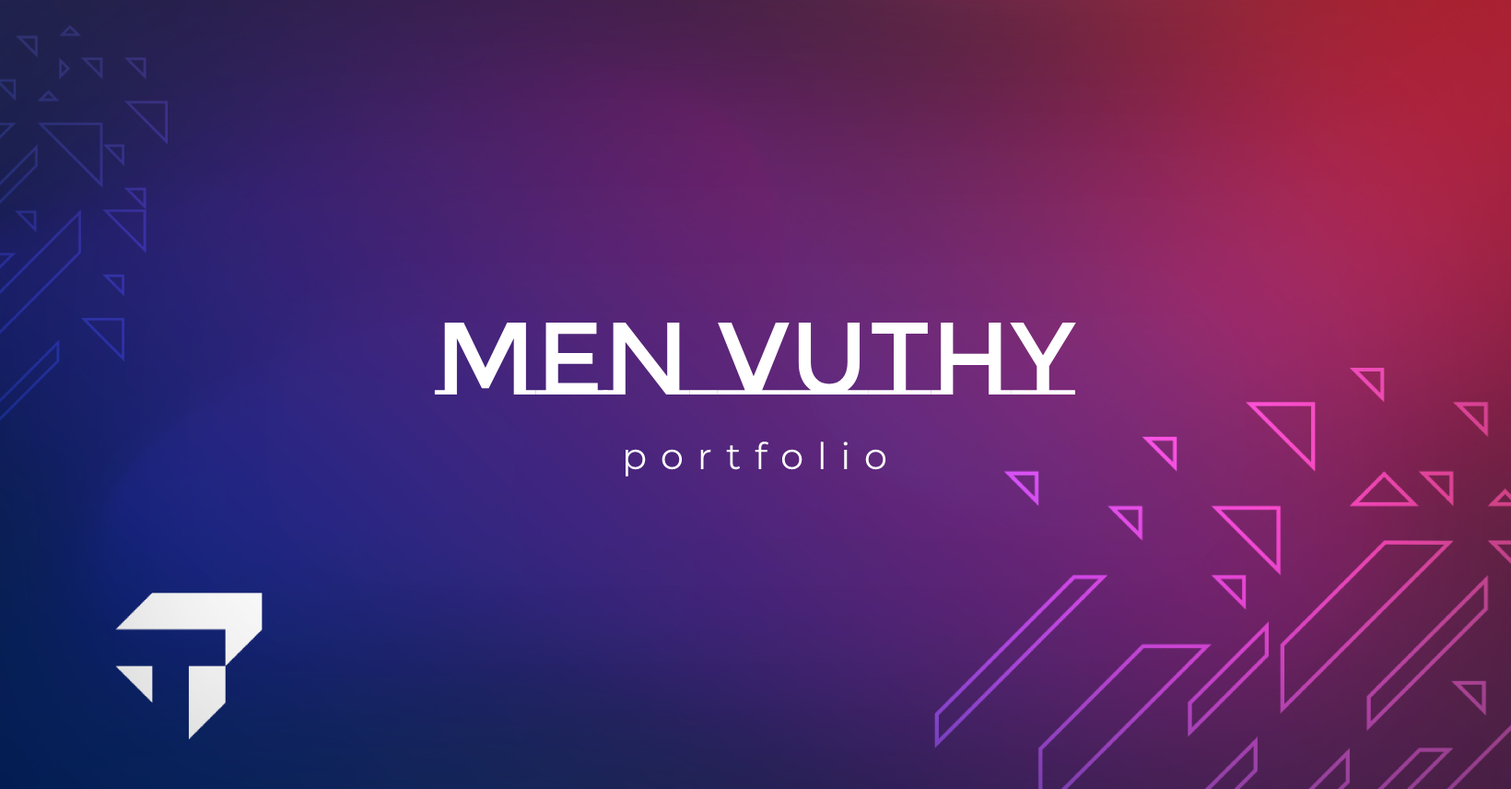
<style>
.page{position:relative;width:1511px;height:789px}
.page>*{position:absolute;margin:0}
.t1{font:103px "MontserratSubrayada-Regular";color:#ffffff}
.t2{font:36.9px "Montserrat-Regular";letter-spacing:0.369em;color:#ffffff}
</style>
<div class="page">
<p class="t1" style="left:434px;top:322px;width:642px;height:72px">MEN Vuthy</p>
<p class="t2" style="left:625px;top:441px;width:262px;height:35px">portfolio</p>
</div>
